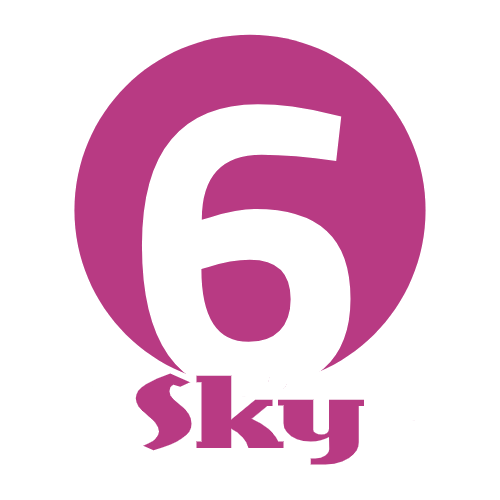
<style>
.page{position:relative;width:500px;height:500px;background:#ffffff}
.page>*{position:absolute;margin:0}
.t1{font:100px "EastMarket";color:#b83a83;scale:1.5 1}
</style>
<div class="page">
<p class="t1" style="left:135px;top:373px;width:230px;height:92px">Sky</p>
</div>
